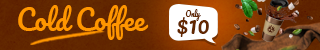
<style>
.page{position:relative;width:320px;height:50px}
.page>*{position:absolute;margin:0}
.t1{font:26.8px "Pacifico-Regular";color:#ff9600}
.t2{font:23.2px "Pacifico-Regular";color:#622700}
.t3{font:7px/12.2px "Pacifico-Regular";color:#622700}
</style>
<div class="page">
<p class="t1" style="left:18px;top:5px;width:131px;height:35px">Cold Coffee</p>
<p class="t2" style="left:177px;top:17px;width:32px;height:20px">$10</p>
<p class="t3" style="left:185px;top:9px;width:16px;height:12px;text-align:center">Only</p>
</div>
